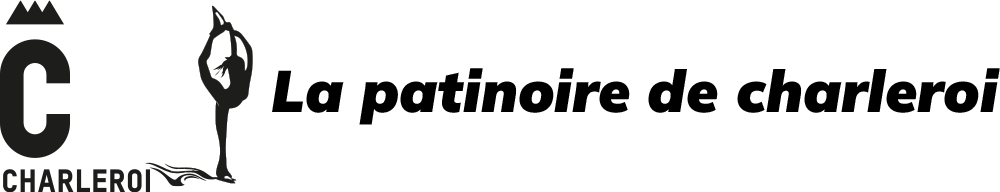
<style>
.page{position:relative;width:1000px;height:192px;background:#ffffff}
.page>*{position:absolute;margin:0}
.t1{font:58.3px "MulishItalic-ExtraBlackItalic";color:#000000}
</style>
<div class="page">
<p class="t1" style="left:272px;top:68px;width:728px;height:57px">La patinoire de charleroi</p>
</div>
